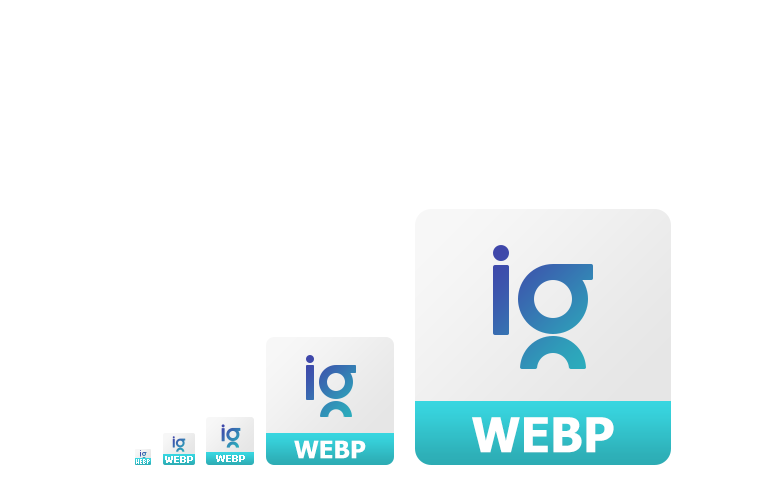
<style>
.page{position:relative;width:768px;height:480px;background:#ffffff}
.page>*{position:absolute;margin:0}
.t1{font:48px "Tahoma-Bold";color:#ffffff}
.t2{font:24px "Tahoma-Bold";color:#ffffff}
.t3{font:10px "Tahoma-Bold";color:#ffffff}
</style>
<div class="page">
<p class="t1" style="left:472px;top:417px;width:142px;height:36px">WEBP</p>
<p class="t2" style="left:294px;top:440px;width:72px;height:19px">WEBP</p>
<p class="t3" style="left:216px;top:455px;width:29px;height:7px">WEBP</p>
</div>
